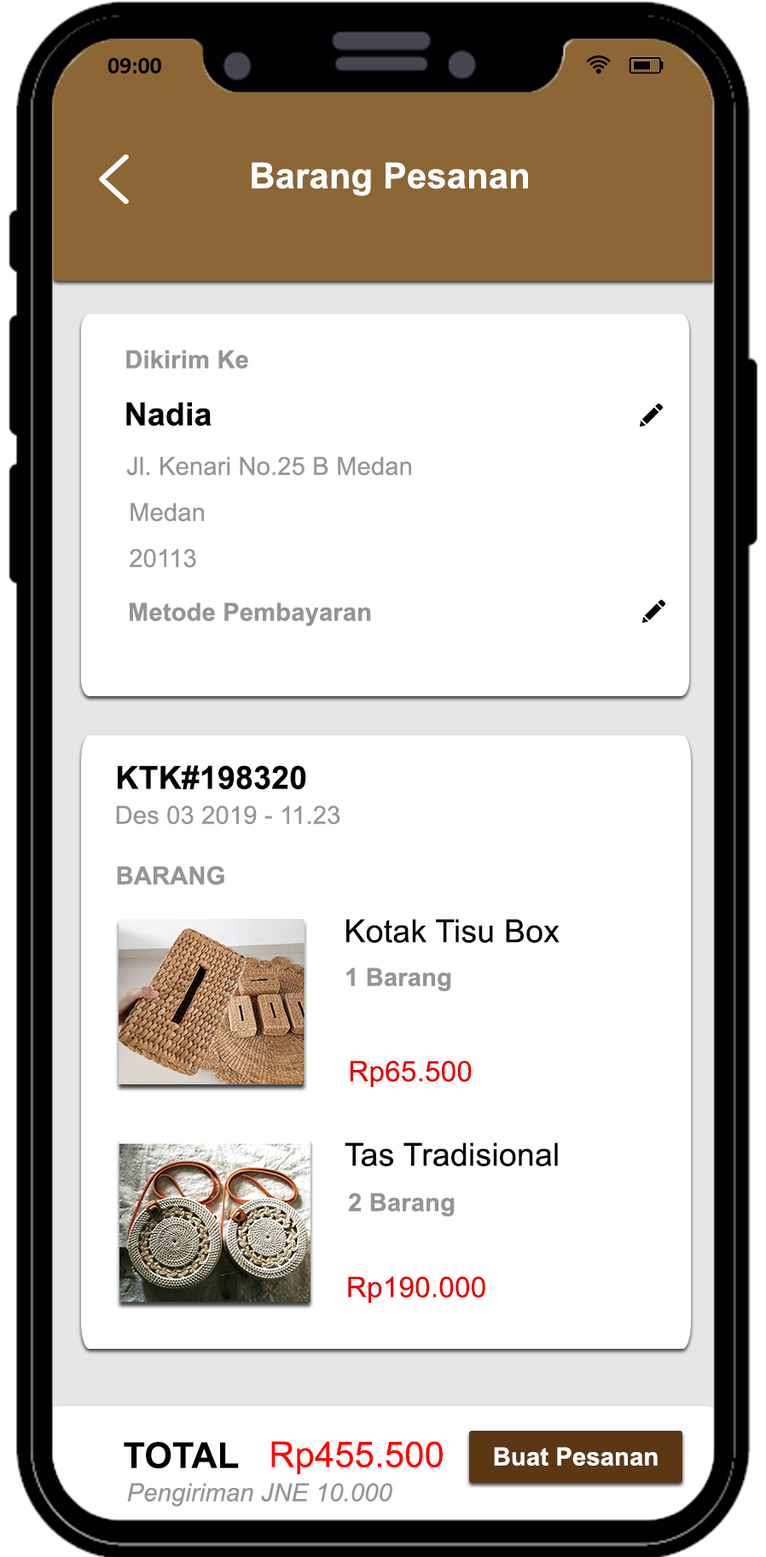
<style>
.page{position:relative;width:766px;height:1557px;background:#ffffff}
.page>*{position:absolute;margin:0}
.t1{font:23.6px "Calibri-Bold";color:#000000}
.t2{font:35.5px "Arial-BoldMT";letter-spacing:0.005em;color:#ffffff}
.t3{font:24.9px "Arial-BoldMT";letter-spacing:0.005em;color:#959595}
.t4{font:32px "Arial-BoldMT";letter-spacing:0.005em;color:#000000}
.t5{font:24.9px "ArialMT";letter-spacing:0.005em;color:#959595}
.t6{font:32px "ArialMT";letter-spacing:0.005em;color:#000000}
.t7{font:28.4px "ArialMT";letter-spacing:0.005em;color:#e50000}
.t8{font:35.5px "Arial-BoldMT";letter-spacing:0.005em;color:#000000}
.t9{font:35.5px "ArialMT";letter-spacing:0.005em;color:#ff0000}
.t10{font:24.9px "Arial-BoldMT";letter-spacing:0.005em;color:#ffffff}
.t11{font:24.9px "Arial-ItalicMT";letter-spacing:0.005em;color:#959595}
</style>
<div class="page">
<p class="t1" style="left:107px;top:58px;width:54px;height:15px">09:00</p>
<p class="t2" style="left:252px;top:162px;width:276px;height:34px">Barang Pesanan</p>
<p class="t3" style="left:126px;top:350px;width:122px;height:18px">Dikirim Ke</p>
<p class="t4" style="left:126px;top:402px;width:86px;height:24px">Nadia</p>
<p class="t5" style="left:126px;top:456px;width:285px;height:19px">Jl. Kenari No.25 B Medan</p>
<p class="t5" style="left:131px;top:502px;width:73px;height:19px">Medan</p>
<p class="t5" style="left:130px;top:548px;width:66px;height:19px">20113</p>
<p class="t3" style="left:130px;top:602px;width:241px;height:24px">Metode Pembayaran</p>
<p class="t4" style="left:118px;top:765px;width:188px;height:25px">KTK#198320</p>
<p class="t5" style="left:116px;top:805px;width:224px;height:19px">Des 03 2019 - 11.23</p>
<p class="t3" style="left:117px;top:866px;width:107px;height:19px">BARANG</p>
<p class="t6" style="left:346px;top:919px;width:214px;height:24px">Kotak Tisu Box</p>
<p class="t3" style="left:346px;top:967px;width:105px;height:24px">1 Barang</p>
<p class="t7" style="left:350px;top:1060px;width:122px;height:28px">Rp65.500</p>
<p class="t6" style="left:345px;top:1142px;width:213px;height:24px">Tas Tradisional</p>
<p class="t3" style="left:348px;top:1192px;width:107px;height:24px">2 Barang</p>
<p class="t7" style="left:348px;top:1276px;width:137px;height:27px">Rp190.000</p>
<p class="t8" style="left:124px;top:1442px;width:115px;height:27px">TOTAL</p>
<p class="t9" style="left:271px;top:1441px;width:172px;height:33px">Rp455.500</p>
<p class="t10" style="left:494px;top:1447px;width:164px;height:18px">Buat Pesanan</p>
<p class="t11" style="left:127px;top:1483px;width:265px;height:23px">Pengiriman JNE 10.000</p>
</div>
